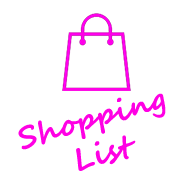
<style>
.page{position:relative;width:192px;height:192px;background:#ffffff}
.page>*{position:absolute;margin:0}
.t1{font:30px "SegoeScript-Bold";color:#ff00e4}
</style>
<div class="page">
<p class="t1" style="left:18px;top:93px;width:148px;height:78px;text-align:center;rotate:-16deg">Shopping<br>List</p>
</div>
